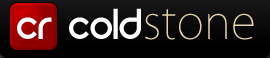
<style>
.page{position:relative;width:270px;height:58px}
.page>*{position:absolute;margin:0}
.t1{font:48px "REZ";color:#ffffff}
.t2{font:46px "KozGoPro-ExtraLight";color:#e4d5ac}
</style>
<div class="page">
<p class="t1" style="left:17px;top:17px;width:35px;height:22px">cr</p>
<p class="t2" style="left:69px;top:8px;width:185px;height:32px"><span class="t1">cold</span>stone</p>
</div>
